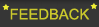
<style>
.page{position:relative;width:99px;height:27px;background:#363636}
.page>*{position:absolute;margin:0}
.t1{font:16px "Shruti";color:#cbc92c}
</style>
<div class="page">
<p class="t1" style="left:10px;top:8px;width:80px;height:12px">FEEDBACK</p>
</div>
